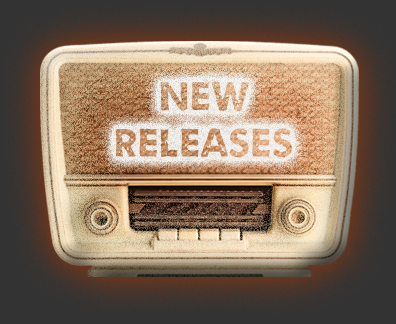
<style>
.page{position:relative;width:396px;height:324px}
.page>*{position:absolute;margin:0}
.t1{font:44.2px/46.7px "Umbrage";letter-spacing:0.056em}
</style>
<div class="page">
<p class="t1" style="left:115px;top:81px;width:178px;height:77px;text-align:center">NEW<br>RELEASES</p>
</div>
